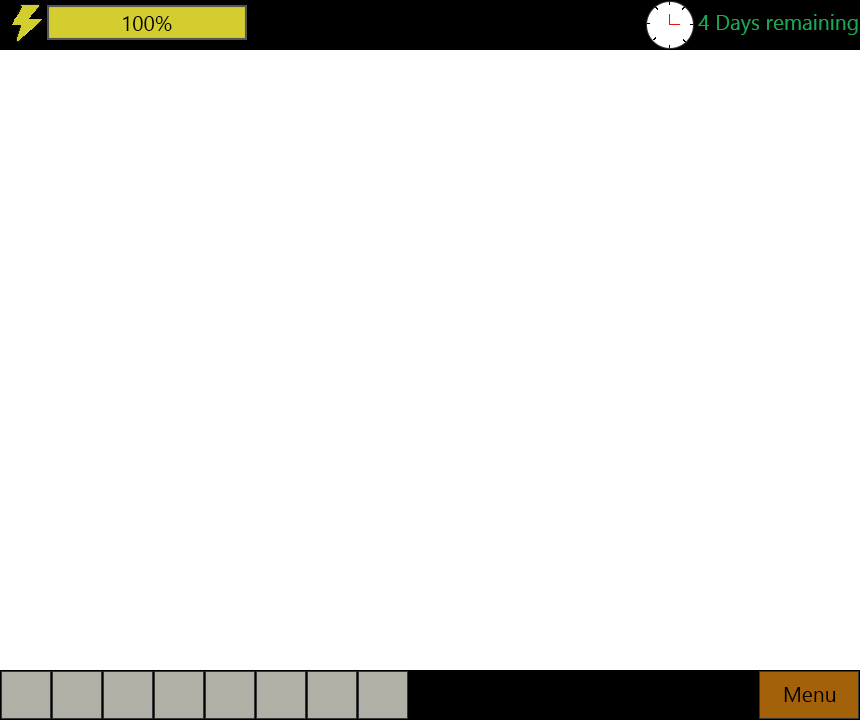
<style>
.page{position:relative;width:860px;height:720px;background:#ffffff}
.page>*{position:absolute;margin:0}
.t1{font:21px "SegoeUI";color:#000000}
.t2{font:21px "SegoeUI";color:#1aa856}
</style>
<div class="page">
<p class="t1" style="left:123px;top:16px;width:49px;height:15px">100%</p>
<p class="t2" style="left:698px;top:14px;width:160px;height:21px">4 Days remaining</p>
<p class="t1" style="left:784px;top:687px;width:52px;height:15px">Menu</p>
</div>
